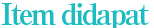
<style>
.page{position:relative;width:154px;height:28px;background:#ffffff}
.page>*{position:absolute;margin:0}
.t1{font:30px "RyuminPro-ExBold";letter-spacing:-0.1em;color:#1cbdc0}
</style>
<div class="page">
<p class="t1" style="left:1px;top:3px;width:148px;height:27px">Item didapat</p>
</div>
